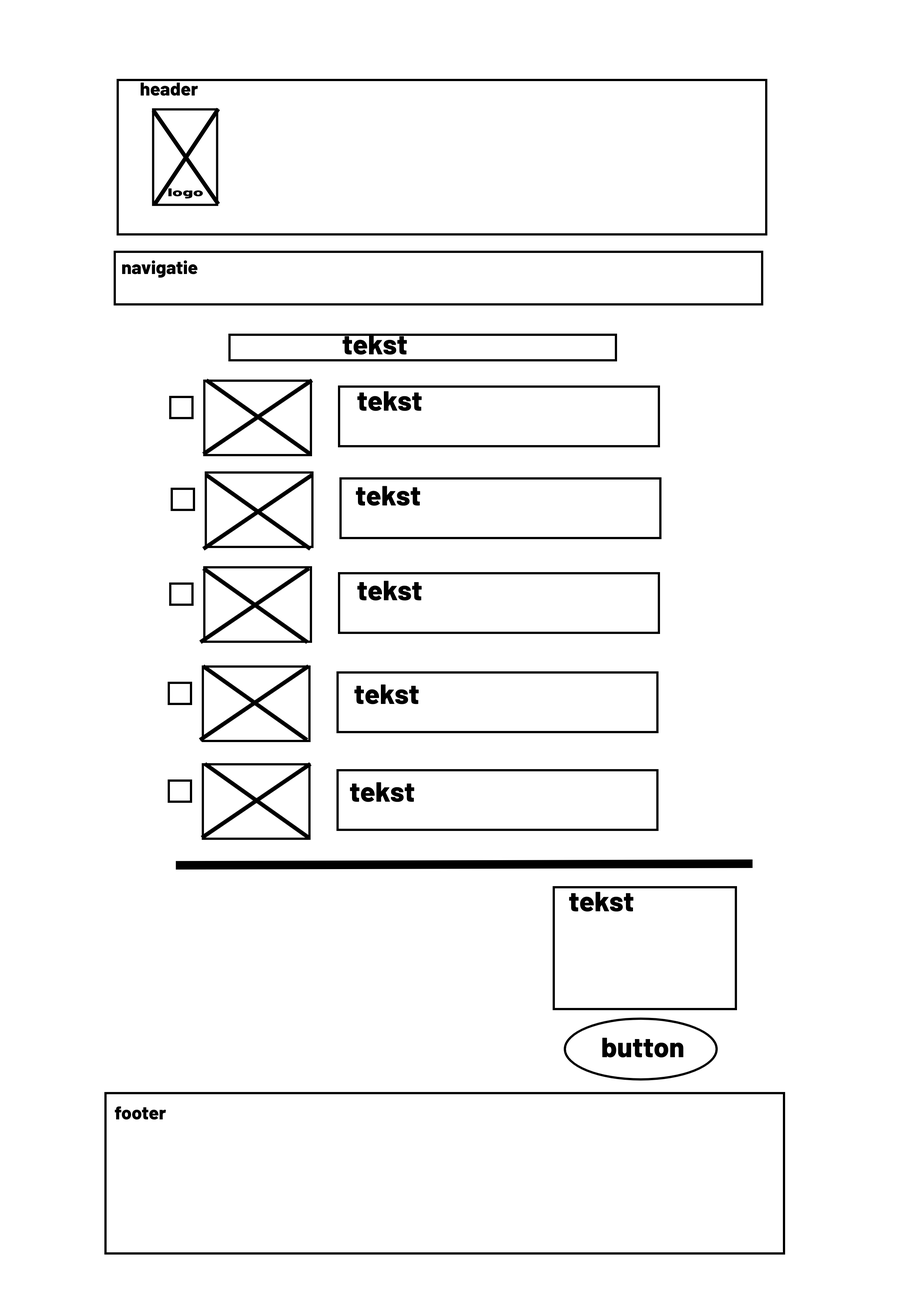
<style>
.page{position:relative;width:918px;height:1299px;background:#ffffff}
.page>*{position:absolute;margin:0}
.t1{font:18.5px "Barlow-ExtraBold";color:#000000}
.t2{font:11.2px "Barlow-ExtraBold";color:#000000;scale:1.66 1}
.t3{font:27.8px "Barlow-ExtraBold";color:#000000}
</style>
<div class="page">
<p class="t1" style="left:141px;top:83px;width:57px;height:13px">header</p>
<p class="t2" style="left:168px;top:188px;width:35px;height:10px">logo</p>
<p class="t1" style="left:122px;top:260px;width:76px;height:18px">navigatie</p>
<p class="t3" style="left:342px;top:335px;width:65px;height:20px">tekst</p>
<p class="t3" style="left:357px;top:391px;width:65px;height:20px">tekst</p>
<p class="t3" style="left:356px;top:486px;width:65px;height:20px">tekst</p>
<p class="t3" style="left:357px;top:581px;width:65px;height:19px">tekst</p>
<p class="t3" style="left:354px;top:684px;width:65px;height:20px">tekst</p>
<p class="t3" style="left:350px;top:782px;width:65px;height:20px">tekst</p>
<p class="t3" style="left:569px;top:891px;width:65px;height:20px">tekst</p>
<p class="t3" style="left:602px;top:1037px;width:81px;height:20px">button</p>
<p class="t1" style="left:115px;top:1106px;width:51px;height:14px">footer</p>
</div>
